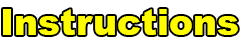
<style>
.page{position:relative;width:240px;height:50px;background:#ffffff}
.page>*{position:absolute;margin:0}
.t1{font:36px "Arial-Black";color:#fffc00}
</style>
<div class="page">
<p class="t1" style="left:3px;top:9px;width:235px;height:26px">Instructions</p>
</div>
